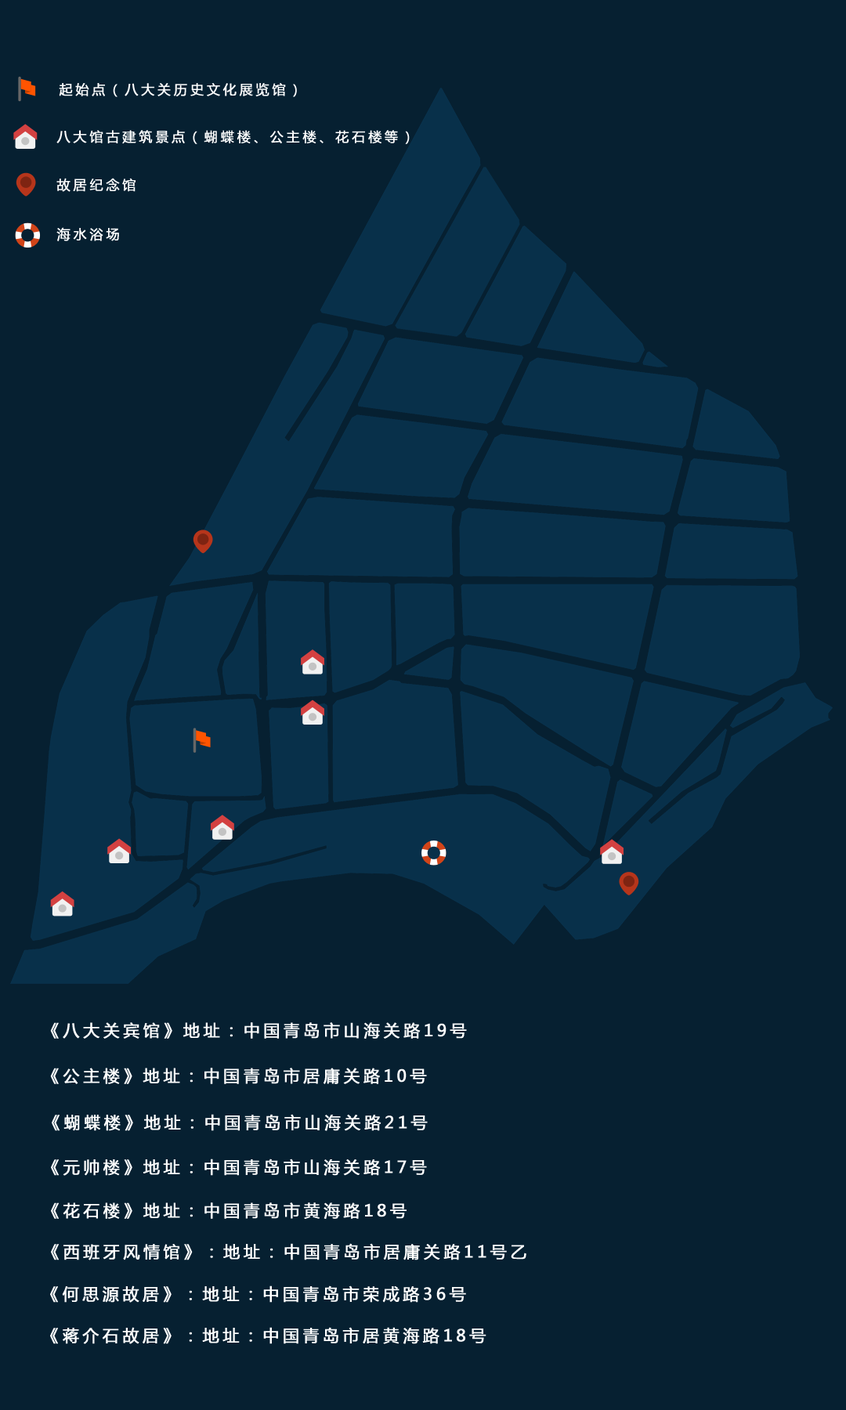
<style>
.page{position:relative;width:846px;height:1410px;background:#062031}
.page>*{position:absolute;margin:0}
.t1{font:13.4px "MicrosoftYaHei";letter-spacing:0.2em;color:#ffffff;font-weight:bold}
.t2{font:16.3px "MicrosoftYaHei";letter-spacing:0.2em;color:#ffffff;font-weight:bold}
</style>
<div class="page">
<p class="t1" style="left:59px;top:83px;width:238px;height:14px">起始点（八大关历史文化展览馆）</p>
<p class="t1" style="left:56px;top:130px;width:354px;height:14px">八大馆古建筑景点（蝴蝶楼、公主楼、花石楼等）</p>
<p class="t1" style="left:56px;top:178px;width:79px;height:14px">故居纪念馆</p>
<p class="t1" style="left:56px;top:227px;width:63px;height:14px">海水浴场</p>
<p class="t2" style="left:50px;top:1022px;width:417px;height:17px">《八大关宾馆》地址：中国青岛市山海关路19号</p>
<p class="t2" style="left:50px;top:1067px;width:377px;height:17px">《公主楼》地址：中国青岛市居庸关路10号</p>
<p class="t2" style="left:52px;top:1114px;width:376px;height:17px">《蝴蝶楼》地址：中国青岛市山海关路21号</p>
<p class="t2" style="left:51px;top:1158px;width:376px;height:18px">《元帅楼》地址：中国青岛市山海关路17号</p>
<p class="t2" style="left:51px;top:1202px;width:355px;height:17px">《花石楼》地址：中国青岛市黄海路18号</p>
<p class="t2" style="left:51px;top:1243px;width:475px;height:17px">《西班牙风情馆》：地址：中国青岛市居庸关路11号乙</p>
<p class="t2" style="left:50px;top:1285px;width:416px;height:17px">《何思源故居》：地址：中国青岛市荣成路36号</p>
<p class="t2" style="left:50px;top:1327px;width:436px;height:17px">《蒋介石故居》：地址：中国青岛市居黄海路18号</p>
</div>
